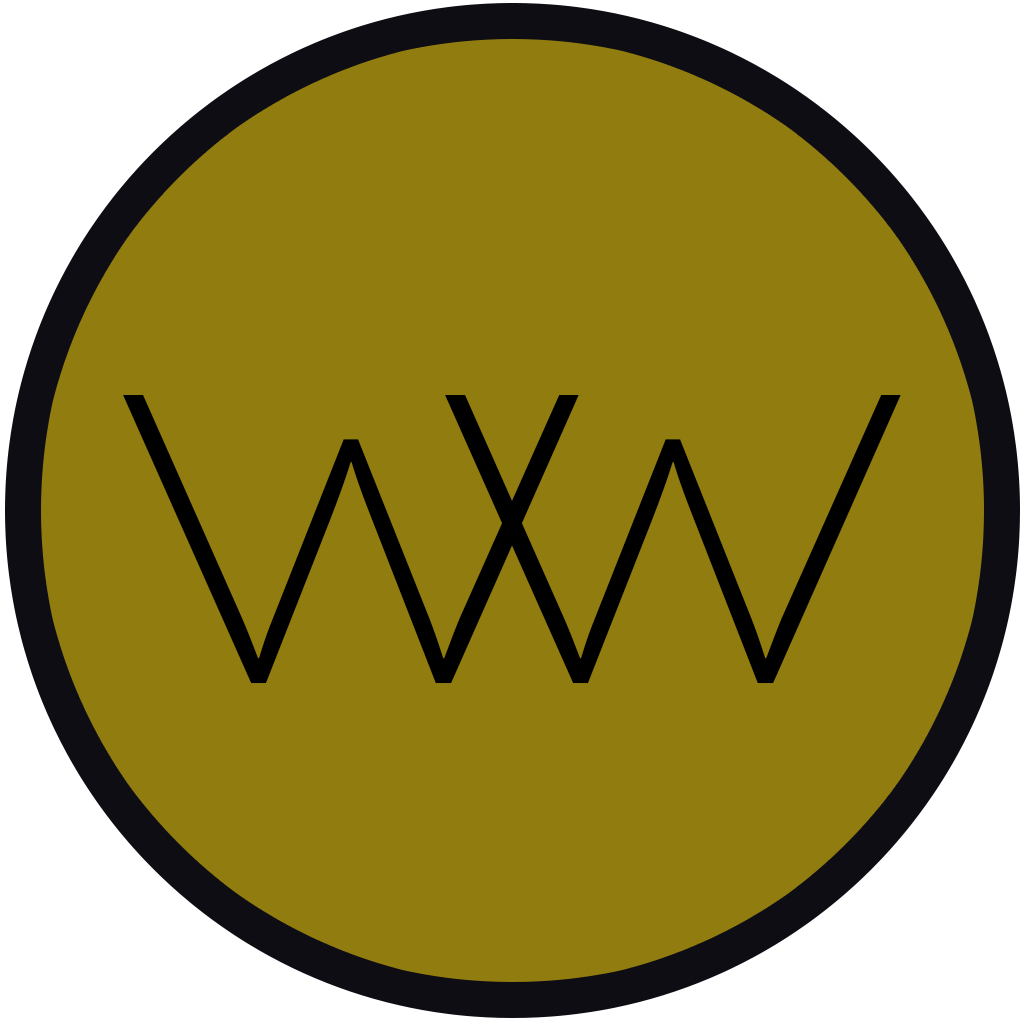
<style>
.page{position:relative;width:1028px;height:1024px;background:#917c10}
.page>*{position:absolute;margin:0}
.t1{font:411.7px "Novecentowide-Light";letter-spacing:-0.32em;color:#000000;scale:1.25 1}
</style>
<div class="page">
<p class="t1" style="left:123px;top:395px;width:778px;height:289px">WW</p>
</div>
